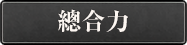
<style>
.page{position:relative;width:187px;height:45px}
.page>*{position:absolute;margin:0}
.t1{font:24px "RyuminPr6N-ExBold";color:#fcf6f1}
</style>
<div class="page">
<p class="t1" style="left:58px;top:9px;width:70px;height:23px">總合力</p>
</div>
